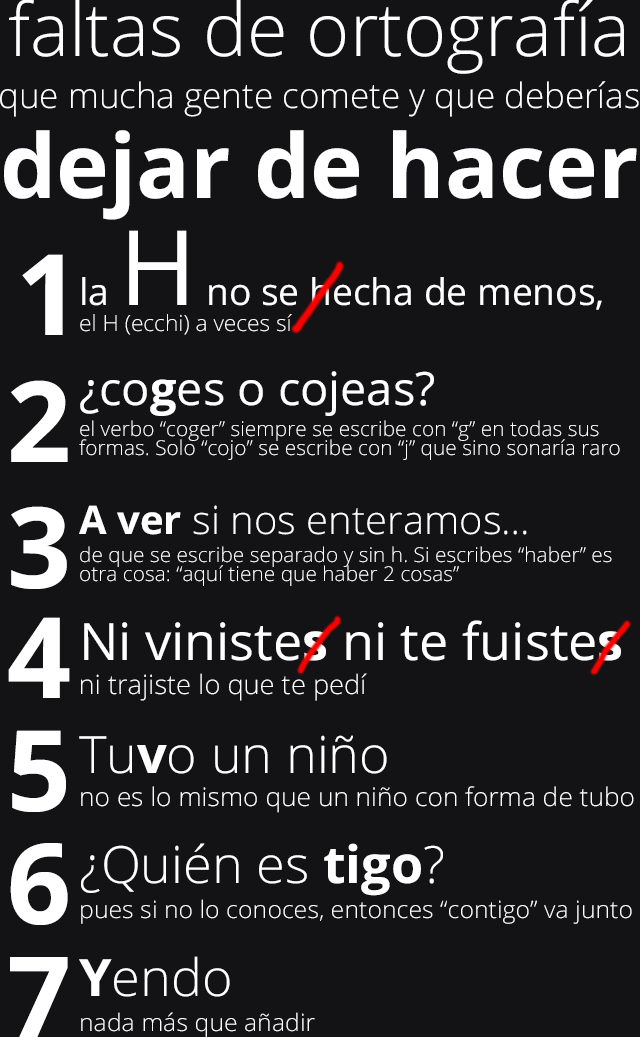
<style>
.page{position:relative;width:640px;height:1037px;background:#131315}
.page>*{position:absolute;margin:0}
.t1{font:35px/51.8px "OpenSans-Light";color:#ffffff}
.t2{font:73.8px "OpenSans-Light";color:#ffffff}
.t3{font:89.4px/89.7px "OpenSans-Bold";color:#ffffff}
.t4{font:36.9px "OpenSans";color:#ffffff}
.t5{font:103.9px "OpenSans";color:#ffffff}
.t6{font:112.2px "OpenSans-Bold";color:#ffffff}
.t7{font:22.2px "OpenSans-Light";color:#ffffff}
.t8{font:46.1px "OpenSans";color:#ffffff}
.t9{font:46.1px "OpenSans-Bold";color:#ffffff}
.t10{font:20.4px/19.3px "OpenSans-Light";color:#ffffff}
.t11{font:39.1px "OpenSans-Light";color:#ffffff}
.t12{font:39.1px "OpenSans-Bold";color:#ffffff}
.t13{font:51.4px "OpenSans";color:#ffffff}
.t14{font:51.4px "OpenSans-Bold";color:#ffffff}
.t15{font:26.8px "OpenSans-Light";color:#ffffff}
.t16{font:51.4px "OpenSans-Light";color:#ffffff}
.t17{font:25.8px "OpenSans-Light";color:#ffffff}
.t18{font:24px "OpenSans-Light";color:#ffffff;scale:1.04 1}
</style>
<div class="page">
<p class="t1" style="left:0px;top:0px;width:639px;height:220px;text-align:center"><span class="t2">faltas de ortografía<br></span>que mucha gente comete y que deberías<br><span class="t3">dejar de hacer</span></p>
<p class="t4" style="left:82px;top:230px;width:520px;height:80px">la <span class="t5">H</span> no se hecha de menos,</p>
<p class="t6" style="left:22px;top:254px;width:41px;height:81px">1</p>
<p class="t7" style="left:80px;top:314px;width:212px;height:21px">el H (ecchi) a veces sí</p>
<p class="t8" style="left:80px;top:371px;width:354px;height:45px">¿co<span class="t9">g</span>es o cojeas?</p>
<p class="t6" style="left:11px;top:380px;width:57px;height:82px">2</p>
<p class="t10" style="left:79px;top:420px;width:541px;height:40px">el verbo “coger” siempre se escribe con “g” en todas sus<br>formas. Solo “cojo” se escribe con “j” que sino sonaría raro</p>
<p class="t6" style="left:11px;top:506px;width:56px;height:83px">3</p>
<p class="t11" style="left:79px;top:505px;width:448px;height:30px"><span class="t12">A ver </span>si nos enteramos…</p>
<p class="t10" style="left:80px;top:546px;width:532px;height:40px">de que se escribe separado y sin h. Si escribes “haber” es<br>otra cosa: “aquí tiene que haber 2 cosas”</p>
<p class="t6" style="left:8px;top:617px;width:62px;height:81px">4</p>
<p class="t13" style="left:84px;top:620px;width:537px;height:41px">Ni viniste<span class="t14">s</span> ni te fuiste<span class="t14">s</span></p>
<p class="t15" style="left:81px;top:673px;width:286px;height:28px">ni trajiste lo que te pedí</p>
<p class="t6" style="left:12px;top:730px;width:54px;height:82px">5</p>
<p class="t16" style="left:79px;top:735px;width:308px;height:39px">Tu<span class="t14">v</span>o un niño</p>
<p class="t17" style="left:81px;top:786px;width:553px;height:27px">no es lo mismo que un niño con forma de tubo</p>
<p class="t6" style="left:10px;top:843px;width:58px;height:82px">6</p>
<p class="t16" style="left:81px;top:843px;width:362px;height:53px">¿Quién es <span class="t14">tigo</span>?</p>
<p class="t18" style="left:81px;top:899px;width:551px;height:25px">pues si no lo conoces, entonces “contigo” va junto</p>
<p class="t6" style="left:10px;top:957px;width:58px;height:80px">7</p>
<p class="t16" style="left:79px;top:956px;width:151px;height:41px"><span class="t14">Y</span>endo</p>
<p class="t18" style="left:81px;top:1012px;width:234px;height:25px">nada más que añadir</p>
</div>
